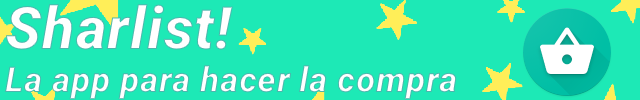
<style>
.page{position:relative;width:640px;height:100px;background:#1de9b6}
.page>*{position:absolute;margin:0}
.t1{font:35.5px "Roboto-BlackItalic";letter-spacing:0.011em;color:#ffffff}
.t2{font:59.6px "Roboto-BlackItalic";letter-spacing:0.011em;color:#ffffff}
</style>
<div class="page">
<p class="t1" style="left:5px;top:4px;width:452px;height:96px"><span class="t2">Sharlist! <br></span>La app para hacer la compra</p>
</div>
